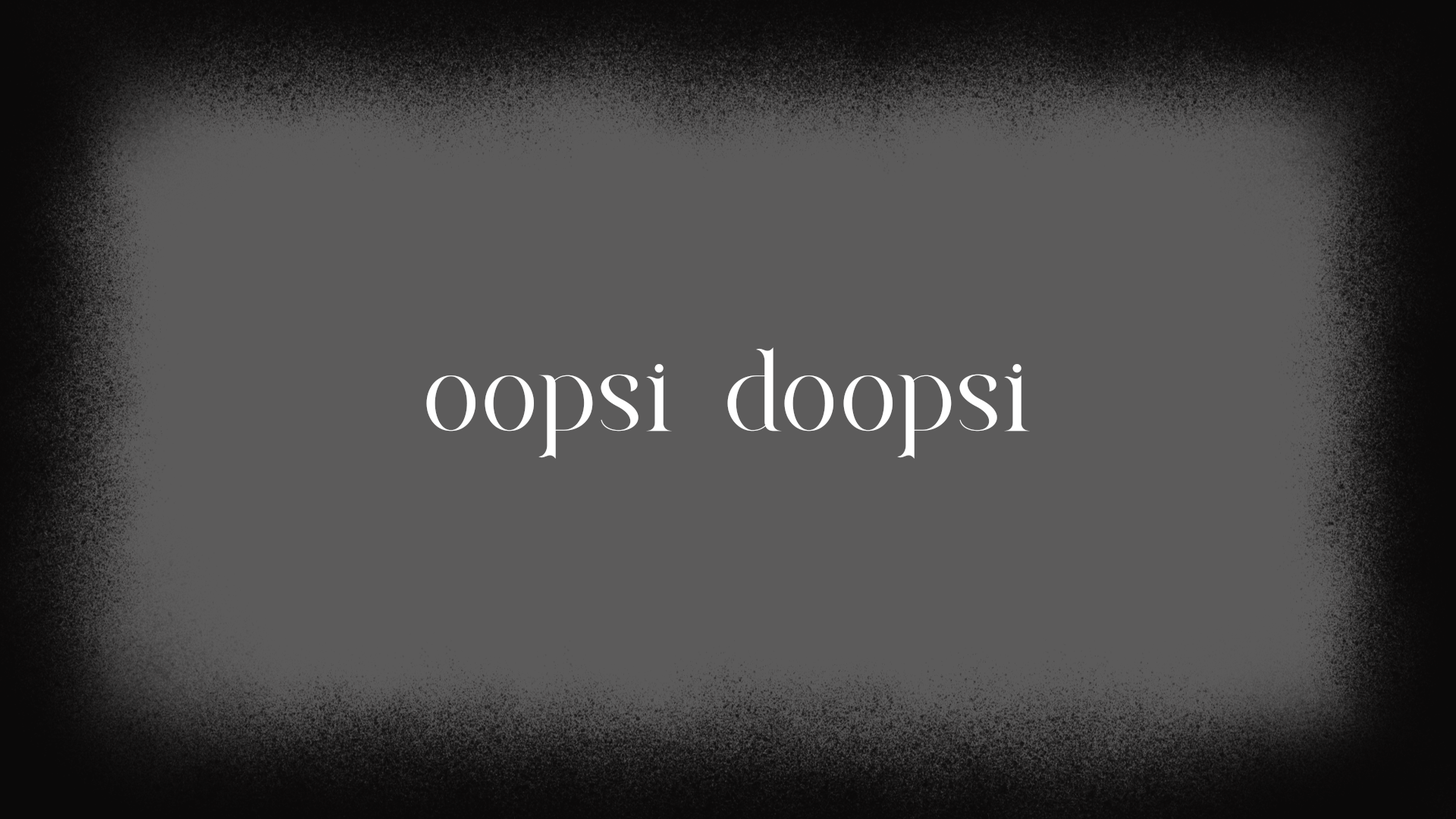
<style>
.page{position:relative;width:1456px;height:819px;background:#5c5b5b}
.page>*{position:absolute;margin:0}
.t1{font:98.6px "MarlitaDEMO";letter-spacing:0.01em;color:#ffffff}
</style>
<div class="page">
<p class="t1" style="left:426px;top:347px;width:604px;height:112px">oopsi doopsi</p>
</div>
